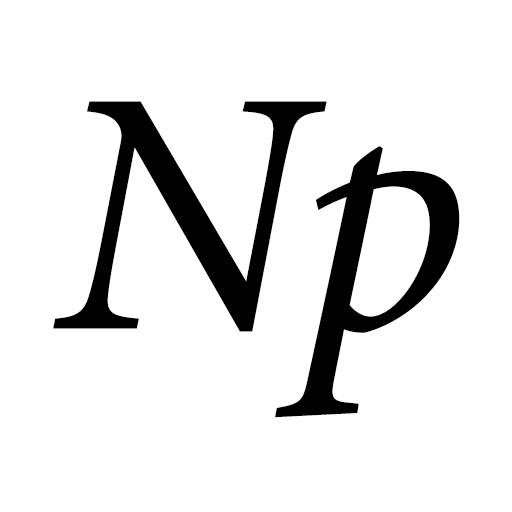
<style>
.page{position:relative;width:512px;height:512px;background:#ffffff}
.page>*{position:absolute;margin:0}
.t1{font:349px "MinionVariableConcept-Italic";color:#000000}
</style>
<div class="page">
<p class="t1" style="left:53px;top:101px;width:407px;height:317px">Np</p>
</div>
